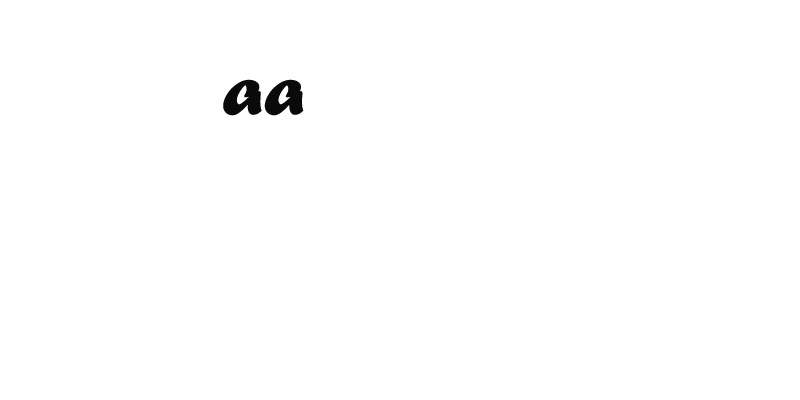
<style>
.page{position:relative;width:800px;height:400px;background:#ffffff}
.page>*{position:absolute;margin:0}
.t1{font:72px "ForteMT";color:#0b0a0a;font-weight:bold}
</style>
<div class="page">
<p class="t1" style="left:223px;top:79px;width:81px;height:37px">aa</p>
</div>
